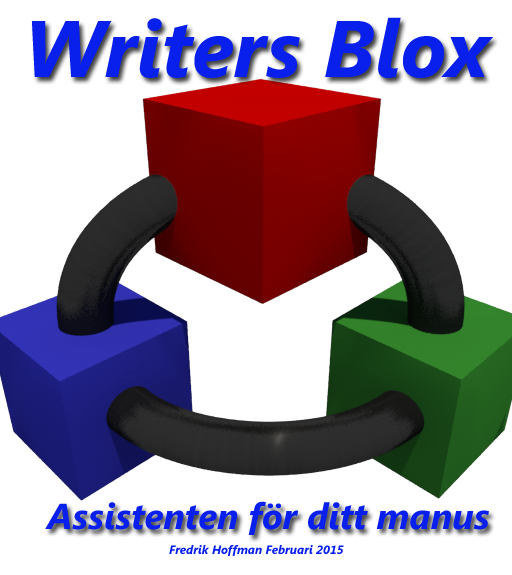
<style>
.page{position:relative;width:512px;height:575px;background:#ffffff}
.page>*{position:absolute;margin:0}
.t1{font:80px "SegoeUI-BoldItalic";color:#091fec}
.t2{font:36px "SegoeUI-BoldItalic";color:#091fec}
.t3{font:12px "SegoeUI-BoldItalic";color:#091fec}
</style>
<div class="page">
<p class="t1" style="left:31px;top:17px;width:462px;height:61px">Writers Blox</p>
<p class="t2" style="left:45px;top:501px;width:444px;height:34px">Assistenten för ditt manus</p>
<p class="t3" style="left:169px;top:545px;width:175px;height:11px">Fredrik Hoffman Februari 2015</p>
</div>
